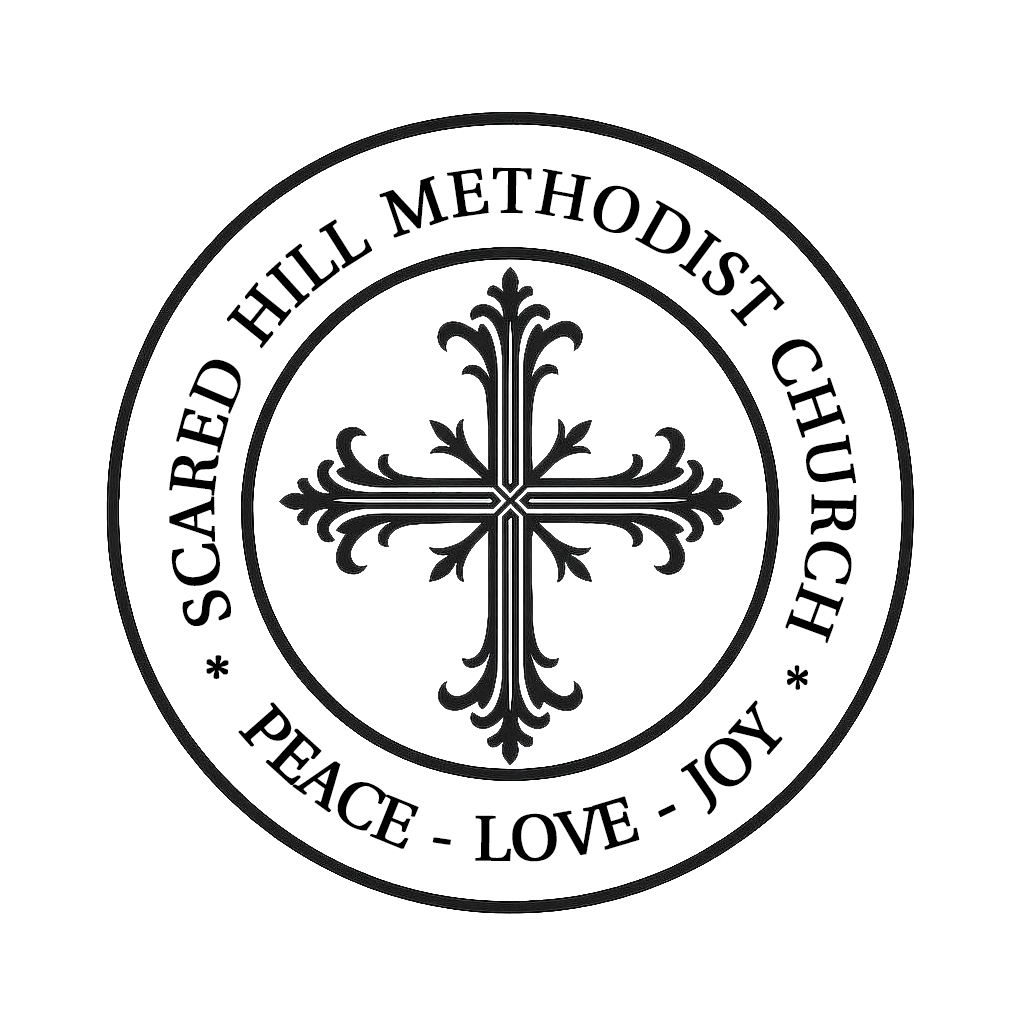
<style>
.page{position:relative;width:1024px;height:1024px;background:#ffffff}
.page>*{position:absolute;margin:0}
.t1{font:64px/100px "UHoi11";color:#000000;text-transform:uppercase;font-weight:bold}
.t2{font:64px "UHoi11";color:#000000;text-transform:uppercase;font-weight:bold}
</style>
<div class="page">
<p class="t1" style="left:169px;top:167px;width:688px;height:523px">* Scared hill methodist church *</p>
<p class="t2" style="left:238px;top:700px;width:545px;height:162px;rotate:3deg">Peace - love - joy</p>
</div>
